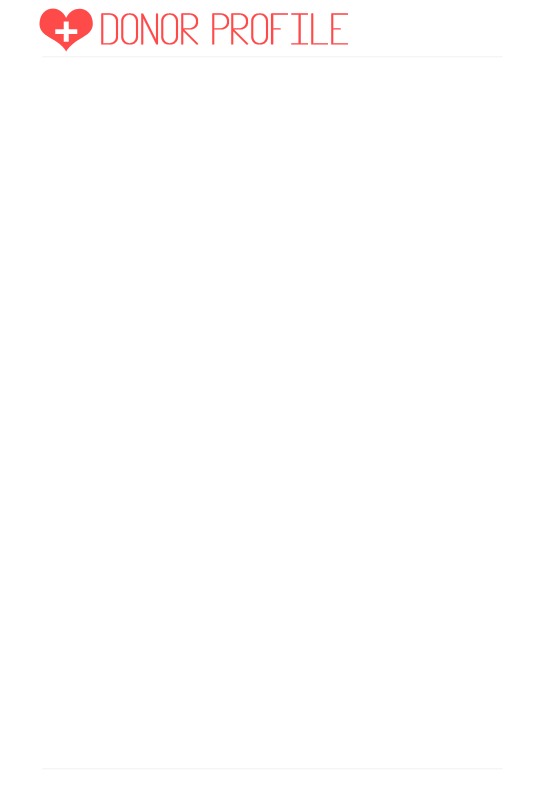
<style>
.page{position:relative;width:544px;height:788px;background:#ffffff}
.page>*{position:absolute;margin:0}
.t1{font:43.8px "Infinity";letter-spacing:-0.02em;color:#ff4a4a;font-weight:bold}
.t2{font:46.3px "LeagueGothic-Regular";letter-spacing:-0.02em;color:#ffffff;font-weight:bold}
</style>
<div class="page">
<p class="t1" style="left:101px;top:13px;width:247px;height:32px">DONOR PROFILE</p>
<p class="t2" style="left:55px;top:21px;width:23px;height:21px">+</p>
</div>
